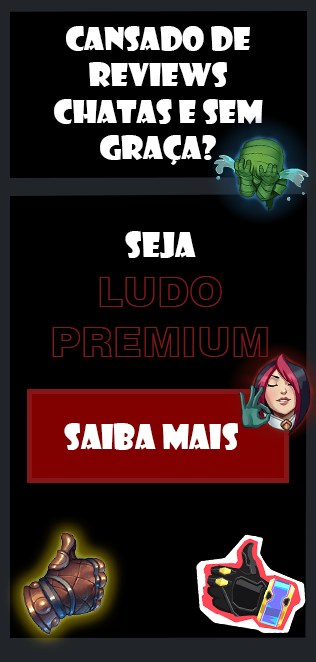
<style>
.page{position:relative;width:316px;height:662px;background:#000000}
.page>*{position:absolute;margin:0}
.t1{font:30.4px "ShowcardGothic-Reg";color:#ffffff;scale:1.05 1}
.t2{font:41.7px "Swiss721BT-BlackOutline";color:#861818}
.t3{font:33.3px "ShowcardGothic-Reg";color:#ffffff}
.t4{font:32.8px "ShowcardGothic-Reg";color:#ffffff}
</style>
<div class="page">
<p class="t1" style="left:54px;top:26px;width:209px;height:139px;text-align:center">Cansado de reviews chatas e sem graça?</p>
<p class="t2" style="left:52px;top:231px;width:216px;height:126px;text-align:center"><span class="t3">Seja<br></span>LUDO PREMIUM</p>
<p class="t4" style="left:64px;top:423px;width:174px;height:27px">Saiba Mais</p>
</div>
